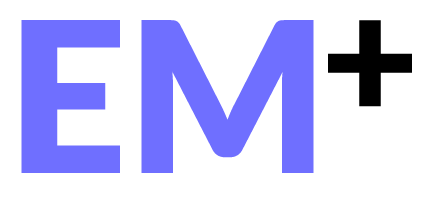
<style>
.page{position:relative;width:425px;height:202px;background:#ffffff}
.page>*{position:absolute;margin:0}
.t1{font:209.5px "Lato-Black";color:#6f6fff}
.t2{font:169.1px "Lato-Black";color:#000000}
</style>
<div class="page">
<p class="t1" style="left:21px;top:20px;width:293px;height:153px">EM</p>
<p class="t2" style="left:328px;top:20px;width:84px;height:87px">+</p>
</div>
